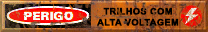
<style>
.page{position:relative;width:208px;height:32px}
.page>*{position:absolute;margin:0}
.t1{font:9px/11px "Arial-BoldMT";letter-spacing:0.02em;color:#000000;font-weight:bold}
</style>
<div class="page">
<p class="t1" style="left:97px;top:7px;width:82px;height:19px;text-align:center">TRILHOS COM<br>ALTA VOLTAGEM</p>
</div>
